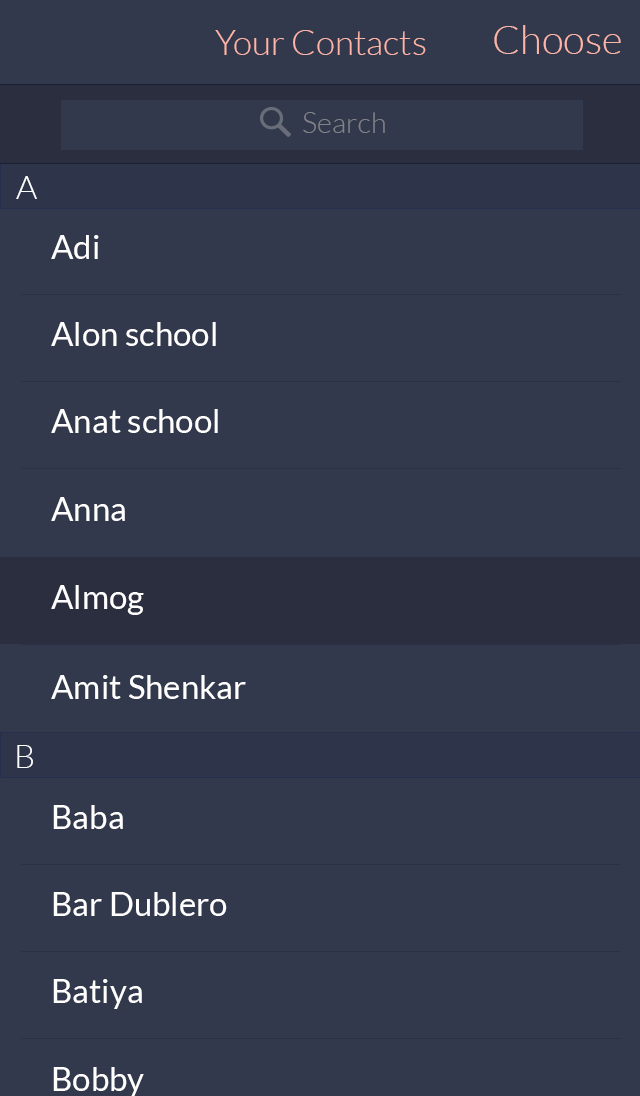
<style>
.page{position:relative;width:640px;height:1096px;background:#33394c}
.page>*{position:absolute;margin:0}
.t1{font:35px "Lato-Light";color:#feb5a8}
.t2{font:40px "Lato-Light";color:#feb5a8}
.t3{font:29px "Lato-Light";color:#818388}
.t4{font:33px "Lato-Light";color:#ffffff}
.t5{font:33px "Lato-Regular";color:#ffffff}
</style>
<div class="page">
<p class="t1" style="left:215px;top:30px;width:211px;height:25px">Your Contacts</p>
<p class="t2" style="left:494px;top:25px;width:127px;height:29px">Choose</p>
<p class="t3" style="left:303px;top:112px;width:82px;height:21px">Search</p>
<p class="t4" style="left:16px;top:176px;width:21px;height:23px">A</p>
<p class="t5" style="left:51px;top:235px;width:48px;height:24px">Adi</p>
<p class="t5" style="left:51px;top:322px;width:165px;height:24px">Alon school</p>
<p class="t5" style="left:51px;top:409px;width:167px;height:24px">Anat school</p>
<p class="t5" style="left:51px;top:497px;width:74px;height:24px">Anna</p>
<p class="t5" style="left:51px;top:585px;width:93px;height:30px">Almog</p>
<p class="t5" style="left:51px;top:675px;width:195px;height:24px">Amit Shenkar</p>
<p class="t4" style="left:17px;top:745px;width:16px;height:23px">B</p>
<p class="t5" style="left:53px;top:805px;width:70px;height:24px">Baba</p>
<p class="t5" style="left:53px;top:892px;width:174px;height:24px">Bar Dublero</p>
<p class="t5" style="left:53px;top:979px;width:89px;height:30px">Batiya</p>
<p class="t5" style="left:53px;top:1067px;width:91px;height:30px">Bobby</p>
</div>
